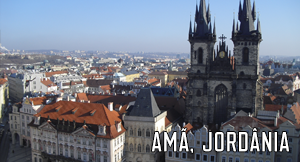
<style>
.page{position:relative;width:300px;height:162px}
.page>*{position:absolute;margin:0}
.t1{font:24px "Clarke";color:#ffffff}
</style>
<div class="page">
<p class="t1" style="left:152px;top:128px;width:137px;height:25px">AMÃ, JORDânia</p>
</div>
